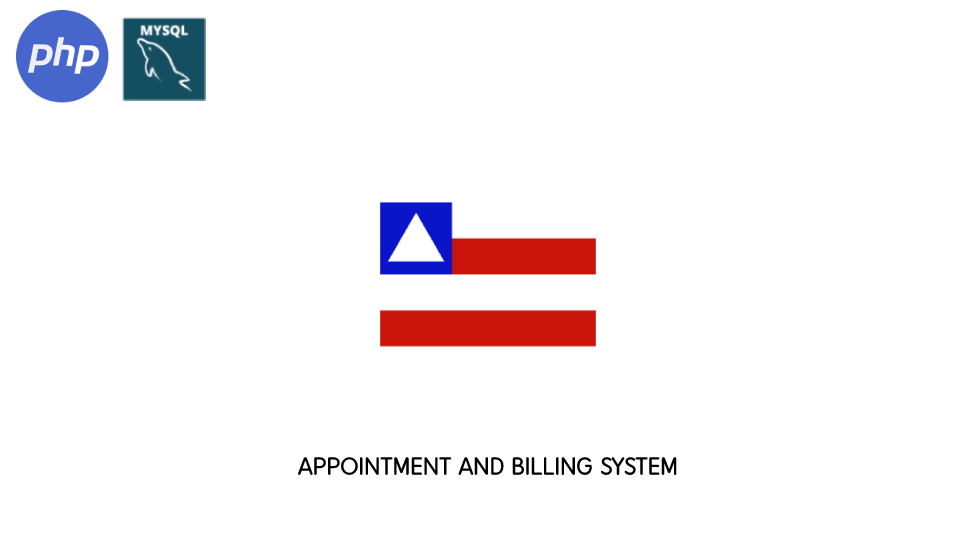
<style>
.page{position:relative;width:976px;height:549px;background:#ffffff}
.page>*{position:absolute;margin:0}
.t1{font:24px "DXLBaB-KSCpc-EUC-H";color:#000000}
</style>
<div class="page">
<p class="t1" style="left:298px;top:456px;width:379px;height:20px">APPOINTMENT AND BILLING SYSTEM</p>
</div>
